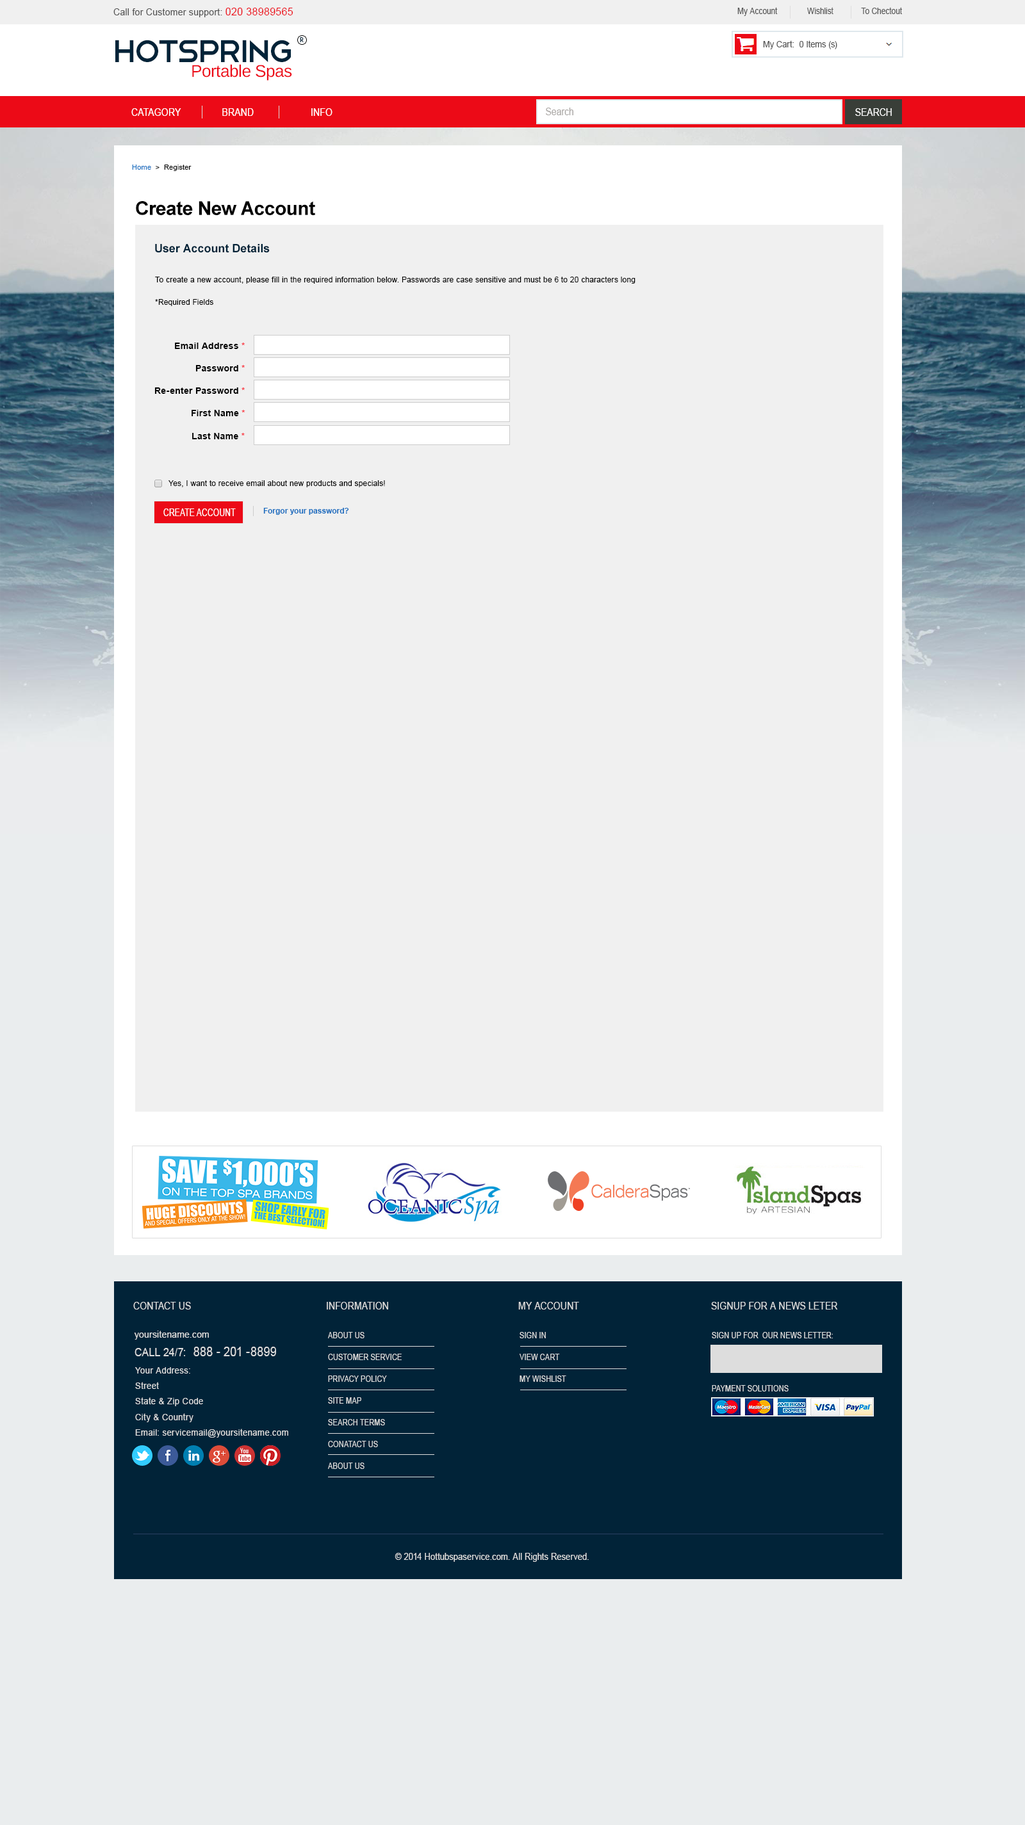
<style>
.page{position:relative;width:1025px;height:1825px;background:#f0f0f0}
.page>*{position:absolute;margin:0}
.t1{font:9.4px "ArialMT";letter-spacing:0.02em;color:#555555;scale:0.95 1}
.t2{font:10.8px "ArialMT";letter-spacing:0.02em;color:#ec0a17;scale:0.95 1}
.t3{font:8.8px "ArialMT";color:#555555;scale:0.87 1}
.t4{font:41px "Telegrafico";letter-spacing:-0.08em;color:#012338}
.t5{font:6.8px "HarmoniaSansStd-Regular";letter-spacing:0.03em;color:#012338}
.t6{font:8.7px "ArialMT";color:#555555;scale:0.95 1}
.t7{font:16.9px "LiberationSans";letter-spacing:-0.02em;color:#ec0a17}
.t8{font:10.3px "ArialMT";letter-spacing:0.01em;color:#ffffff;scale:0.87 1}
.t9{font:10.3px "ArialMT";color:#aeaba9;scale:0.87 1}
.t10{font:10.3px "ArialMT";color:#ffffff;scale:0.87 1}
.t11{font:7px "ArialMT";letter-spacing:0.02em;color:#000000}
.t12{font:7px "ArialMT";letter-spacing:0.02em;color:#1d70c0}
.t13{font:19.2px "Arial-BoldMT";letter-spacing:-0.02em;color:#000000}
.t14{font:11.5px "Arial-BoldMT";color:#012338}
.t15{font:7.7px "ArialMT";letter-spacing:0.02em;color:#000000}
.t16{font:9px "Arial-BoldMT";letter-spacing:0.02em;color:#000000}
.t17{font:9px "Arial-BoldMT";letter-spacing:0.02em;color:#f92834}
.t18{font:10.6px "ArialMT";color:#ffffff;text-transform:uppercase;scale:0.75 1}
.t19{font:7.7px "Arial-BoldMT";color:#1d70c0}
.t20{font:10.3px "ArialMT";letter-spacing:0.01em;color:#dddddd;scale:0.87 1}
.t21{font:9.8px "ArialMT";letter-spacing:0.03em;color:#dddddd;scale:0.9 1}
.t22{font:8.1px/21.8px "ArialMT";letter-spacing:0.01em;color:#dddddd;scale:0.87 1}
.t23{font:8.1px "ArialMT";letter-spacing:0.01em;color:#dddddd;scale:0.87 1}
.t24{font:13.3px "ArialMT";letter-spacing:0.01em;color:#dddddd;scale:0.87 1}
.t25{font:11.8px "ArialMT";letter-spacing:0.01em;color:#dddddd;scale:0.87 1}
.t26{font:9px/15.4px "ArialMT";letter-spacing:0.03em;color:#dddddd;scale:0.94 1}
.t27{font:9.6px "ArialMT";letter-spacing:0.01em;color:#dddddd;scale:0.87 1}
</style>
<div class="page">
<p class="t1" style="left:113px;top:8px;width:180px;height:9px">Call for Customer support: <span class="t2">020 38989565</span></p>
<p class="t3" style="left:737px;top:7px;width:165px;height:9px">My Account              Wishlist             To Chectout</p>
<p class="t4" style="left:115px;top:40px;width:176px;height:22px">HotSpring</p>
<p class="t5" style="left:300px;top:37px;width:4px;height:5px">R</p>
<p class="t6" style="left:763px;top:40px;width:74px;height:9px">My Cart:  0 Items (s)</p>
<p class="t7" style="left:192px;top:64px;width:100px;height:17px">Portable Spas</p>
<p class="t8" style="left:131px;top:108px;width:201px;height:8px">CATAGORY                BRAND                      INFO</p>
<p class="t9" style="left:546px;top:108px;width:27px;height:7px">Search</p>
<p class="t10" style="left:855px;top:108px;width:37px;height:8px">SEARCH</p>
<p class="t11" style="left:132px;top:165px;width:59px;height:6px"><span class="t12">Home </span> &gt;  Register</p>
<p class="t13" style="left:136px;top:201px;width:179px;height:14px">Create New Account</p>
<p class="t14" style="left:155px;top:244px;width:115px;height:9px">User Account Details</p>
<p class="t15" style="left:155px;top:277px;width:480px;height:7px">To create a new account, please fill in the required information below. Passwords are case sensitive and must be 6 to 20 characters long</p>
<p class="t15" style="left:155px;top:299px;width:58px;height:7px">*Required Fields</p>
<p class="t16" style="left:175px;top:343px;width:70px;height:6px">Email Address <span class="t17">*</span></p>
<p class="t16" style="left:195px;top:365px;width:50px;height:6px">Password <span class="t17">*</span></p>
<p class="t16" style="left:154px;top:387px;width:91px;height:7px">Re-enter Password <span class="t17">*</span></p>
<p class="t16" style="left:191px;top:410px;width:54px;height:6px">First Name <span class="t17">*</span></p>
<p class="t16" style="left:192px;top:433px;width:53px;height:6px">Last Name <span class="t17">*</span></p>
<p class="t15" style="left:168px;top:480px;width:217px;height:7px">Yes, I want to receive email about new products and specials!</p>
<p class="t18" style="left:163px;top:509px;width:73px;height:7px">create account</p>
<p class="t19" style="left:263px;top:508px;width:86px;height:7px">Forgor your password?</p>
<p class="t20" style="left:133px;top:1302px;width:58px;height:8px">CONTACT US</p>
<p class="t20" style="left:327px;top:1302px;width:61px;height:8px">INFORMATION</p>
<p class="t20" style="left:518px;top:1302px;width:61px;height:8px">MY ACCOUNT</p>
<p class="t20" style="left:711px;top:1302px;width:127px;height:8px">SIGNUP FOR A NEWS LETER</p>
<p class="t21" style="left:134px;top:1331px;width:75px;height:9px">yoursitename.com</p>
<p class="t22" style="left:328px;top:1332px;width:74px;height:137px;text-align:justify">ABOUT US<br>CUSTOMER SERVICE<br>PRIVACY POLICY <br>SITE MAP<br>SEARCH TERMS<br>CONATACT US<br>ABOUT US</p>
<p class="t22" style="left:519px;top:1332px;width:47px;height:50px;text-align:justify">SIGN IN<br>VIEW CART<br>MY WISHLIST</p>
<p class="t23" style="left:712px;top:1332px;width:121px;height:7px">SIGN UP FOR  OUR NEWS LETTER:</p>
<p class="t24" style="left:134px;top:1347px;width:142px;height:10px"><span class="t25">CALL 24/7:  </span>888 - 201 -8899</p>
<p class="t26" style="left:135px;top:1367px;width:153px;height:71px;text-align:justify">Your Address:<br>Street<br>State &amp; Zip Code<br>City &amp; Country <br>Email: servicemail@yoursitename.com</p>
<p class="t23" style="left:712px;top:1385px;width:76px;height:7px">PAYMENT SOLUTIONS</p>
<p class="t27" style="left:395px;top:1553px;width:194px;height:9px">© 2014 Hottubspaservice.com. All Rights Reserved.</p>
</div>
